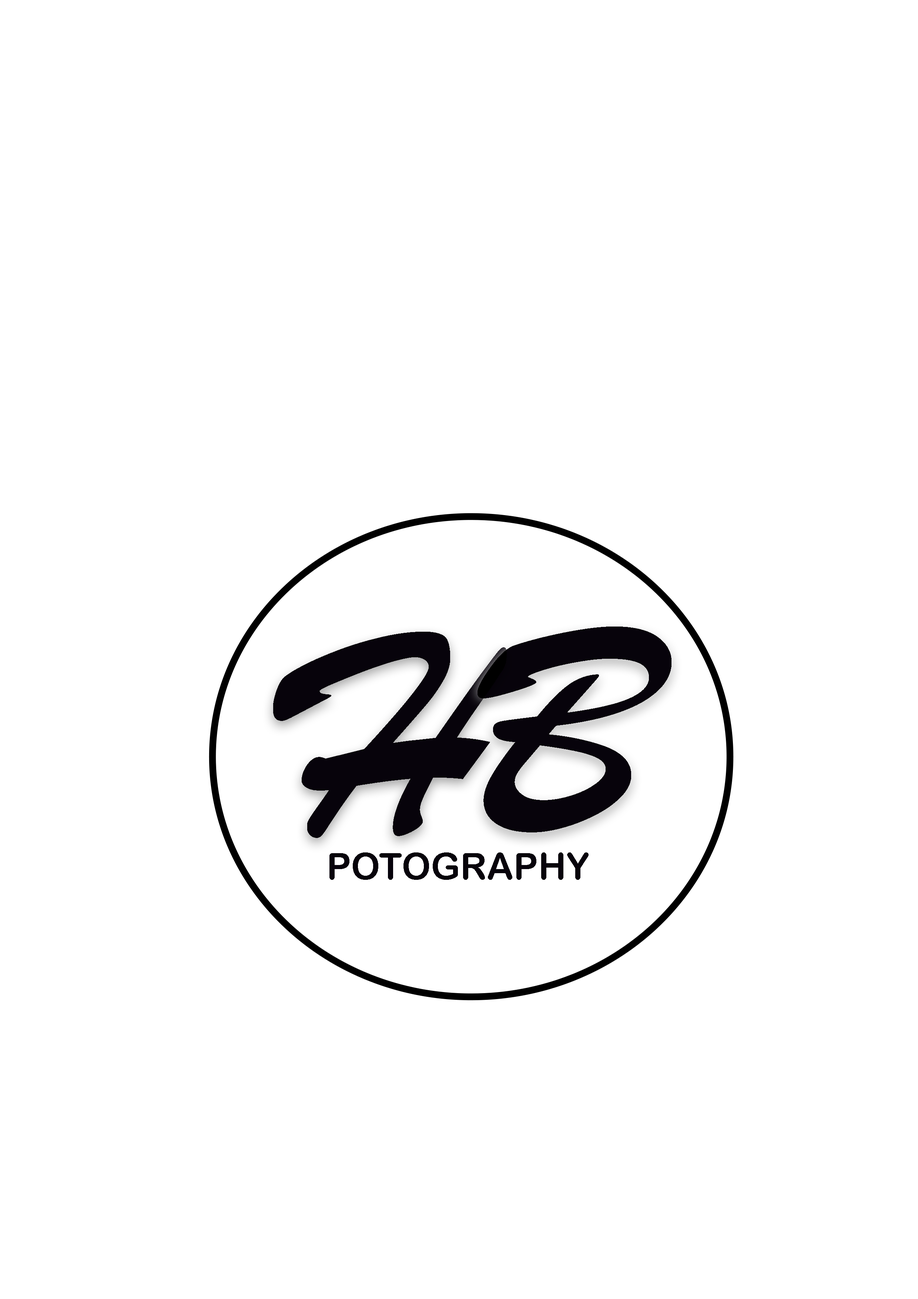
<style>
.page{position:relative;width:918px;height:1299px;background:#ffffff}
.page>*{position:absolute;margin:0}
.t1{font:308.5px "BrushScriptMT";color:#07030b}
.t2{font:37px "ArialRoundedMTBold";color:#07030b}
</style>
<div class="page">
<p class="t1" style="left:478px;top:626px;width:194px;height:206px">B</p>
<p class="t1" style="left:273px;top:632px;width:234px;height:206px">H</p>
<p class="t2" style="left:329px;top:852px;width:260px;height:28px">POTOGRAPHY</p>
</div>
